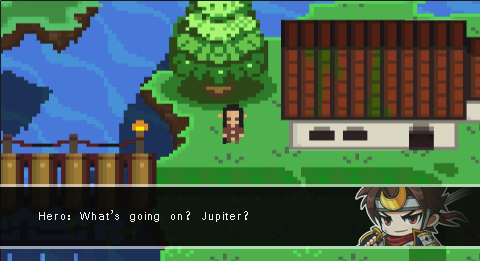
<style>
.page{position:relative;width:480px;height:261px}
.page>*{position:absolute;margin:0}
.t1{font:12px "Vrinda";letter-spacing:0.1em;color:#fefefe}
</style>
<div class="page">
<p class="t1" style="left:39px;top:210px;width:209px;height:12px;opacity:0.9">Hero: What’s going on? Jupiter?</p>
</div>
